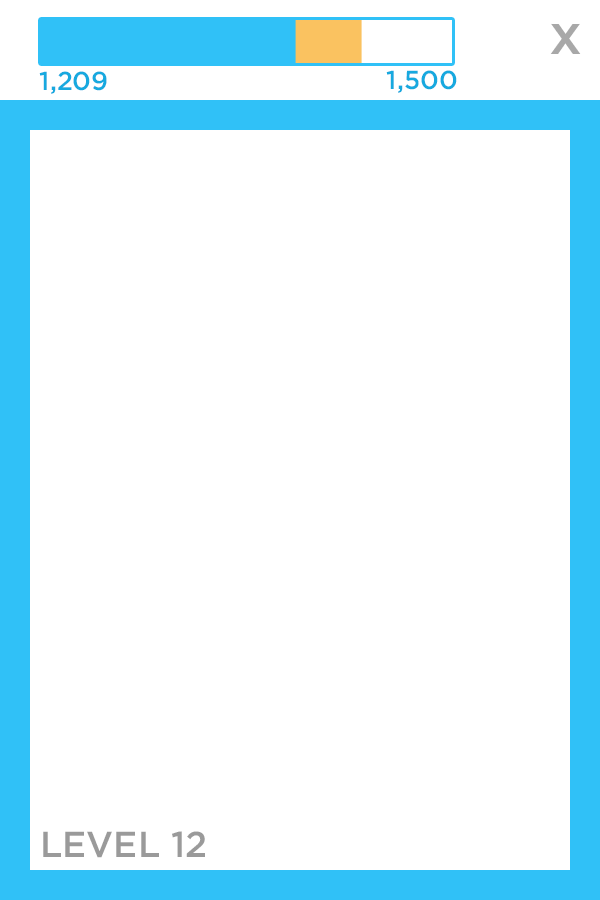
<style>
.page{position:relative;width:600px;height:900px;background:#ffffff}
.page>*{position:absolute;margin:0}
.t1{font:57px "Gotham-Medium";color:#a8a8a8}
.t2{font:26px "Gotham-Medium";color:#17a9df}
.t3{font:36px "Gotham-Medium";color:#9a9a9a}
</style>
<div class="page">
<p class="t1" style="left:550px;top:23px;width:31px;height:31px">x</p>
<p class="t2" style="left:39px;top:71px;width:68px;height:23px">1,209</p>
<p class="t2" style="left:386px;top:70px;width:71px;height:23px">1,500</p>
<p class="t3" style="left:43px;top:831px;width:162px;height:27px">LEVEL 12</p>
</div>
